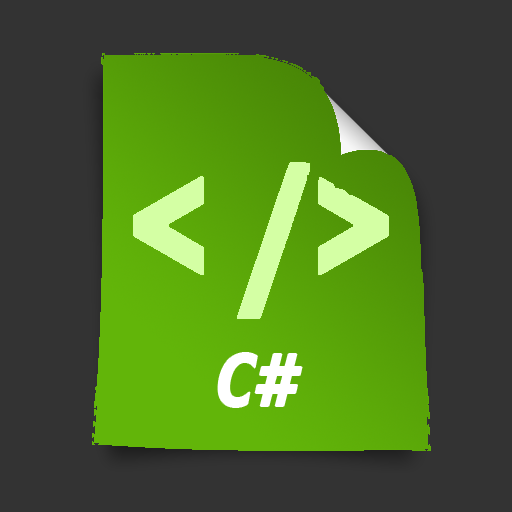
<style>
.page{position:relative;width:512px;height:512px;background:#333333}
.page>*{position:absolute;margin:0}
.t1{font:72px "Menlo-BoldItalic";color:#ffffff}
</style>
<div class="page">
<p class="t1" style="left:218px;top:353px;width:84px;height:54px">C#</p>
</div>
